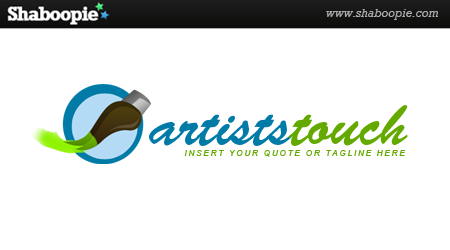
<style>
.page{position:relative;width:450px;height:250px;background:#ffffff}
.page>*{position:absolute;margin:0}
.t1{font:58.3px "BrushScriptStd";color:#007aa7}
.t2{font:58.3px "BrushScriptStd";color:#64a900}
.t3{font:8.3px "Arial-ItalicMT";letter-spacing:0.2em;color:#64a900}
</style>
<div class="page">
<p class="t1" style="left:149px;top:105px;width:259px;height:41px">artists<span class="t2">touch</span></p>
<p class="t3" style="left:184px;top:150px;width:222px;height:7px">INSERT YOUR QUOTE OR TAGLINE HERE</p>
</div>
